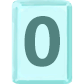
<style>
.page{position:relative;width:84px;height:84px;background:#ffffff}
.page>*{position:absolute;margin:0}
.t1{font:65.3px "MicrosoftYaHei-Bold";color:#52827f}
</style>
<div class="page">
<p class="t1" style="left:24px;top:16px;width:36px;height:51px">0</p>
</div>
